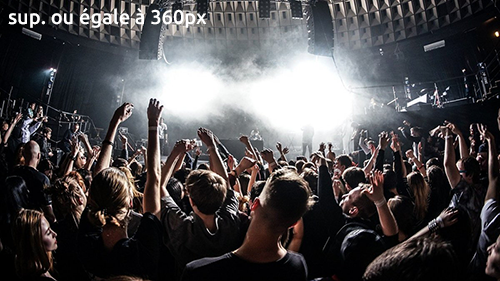
<style>
.page{position:relative;width:500px;height:281px}
.page>*{position:absolute;margin:0}
.t1{font:20px "Ubuntu-Medium";color:#ffffff}
</style>
<div class="page">
<p class="t1" style="left:8px;top:8px;width:199px;height:20px">sup. ou égale à 360px</p>
</div>
